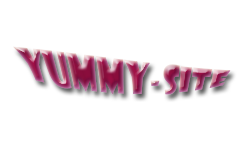
<style>
.page{position:relative;width:250px;height:150px;background:#ffffff}
.page>*{position:absolute;margin:0}
.t1{font:30px "ShowcardGothic-Reg"}
</style>
<div class="page">
<p class="t1" style="left:13px;top:46px;width:218px;height:49px">Yummy-site</p>
</div>
